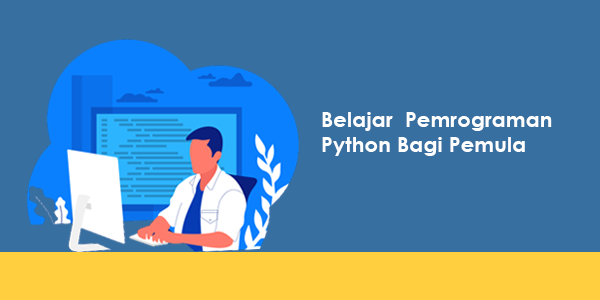
<style>
.page{position:relative;width:600px;height:300px;background:#3770a0}
.page>*{position:absolute;margin:0}
.t1{font:20.8px "CenturyGothic-Bold";letter-spacing:0.01em;color:#ffffff}
</style>
<div class="page">
<p class="t1" style="left:322px;top:112px;width:230px;height:44px">Belajar  Pemrograman<br>Python Bagi Pemula</p>
</div>
